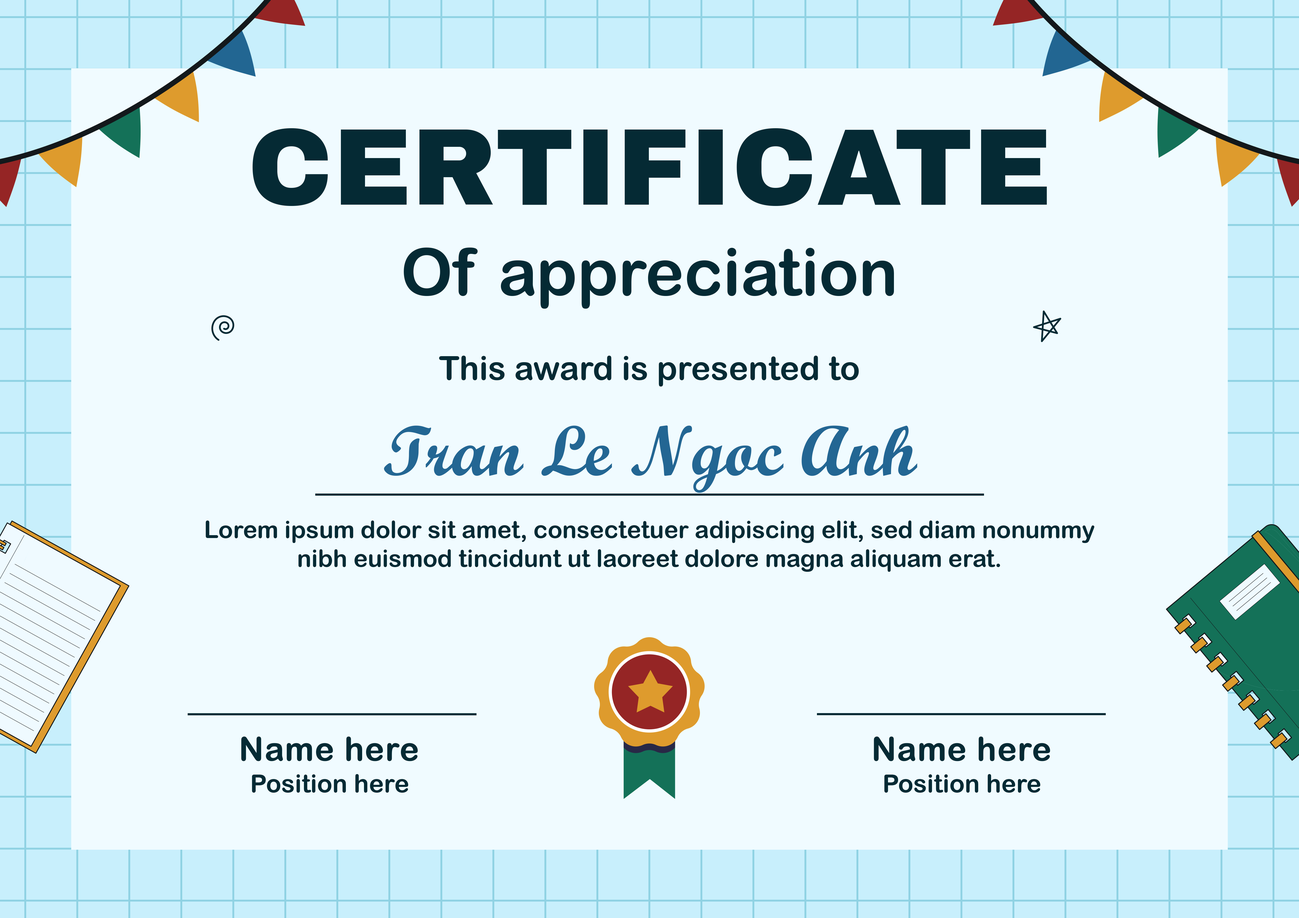
<style>
.page{position:relative;width:1299px;height:918px;background:#f0fbff}
.page>*{position:absolute;margin:0}
.t1{font:109.1px "ArchivoBlack-Regular";color:#052a34}
.t2{font:65.4px "ArialRoundedMTBold";color:#052a34}
.t3{font:33px "ArialRoundedMTBold";color:#052a34}
.t4{font:70.9px "ScriptMTBold";color:#236693}
.t5{font:24px "ArialRoundedMTBold";color:#052a34}
.t6{font:32.7px "ArialRoundedMTBold";color:#052a34;font-weight:bold}
.t7{font:25.1px "ArialRoundedMTBold";color:#052a34}
</style>
<div class="page">
<p class="t1" style="left:252px;top:128px;width:795px;height:78px">CERTIFICATE</p>
<p class="t2" style="left:404px;top:248px;width:490px;height:61px">Of appreciation</p>
<p class="t3" style="left:439px;top:356px;width:420px;height:31px">This award is presented to</p>
<p class="t4" style="left:384px;top:425px;width:533px;height:68px">Tran Le Ngoc Anh</p>
<p class="t5" style="left:205px;top:521px;width:889px;height:51px;text-align:center">Lorem ipsum dolor sit amet, consectetuer adipiscing elit, sed diam nonummy<br>nibh euismod tincidunt ut laoreet dolore magna aliquam erat.</p>
<p class="t6" style="left:241px;top:737px;width:177px;height:24px">Name here</p>
<p class="t6" style="left:873px;top:737px;width:177px;height:24px">Name here</p>
<p class="t7" style="left:252px;top:774px;width:156px;height:19px">Position here</p>
<p class="t7" style="left:884px;top:774px;width:156px;height:19px">Position here</p>
</div>
